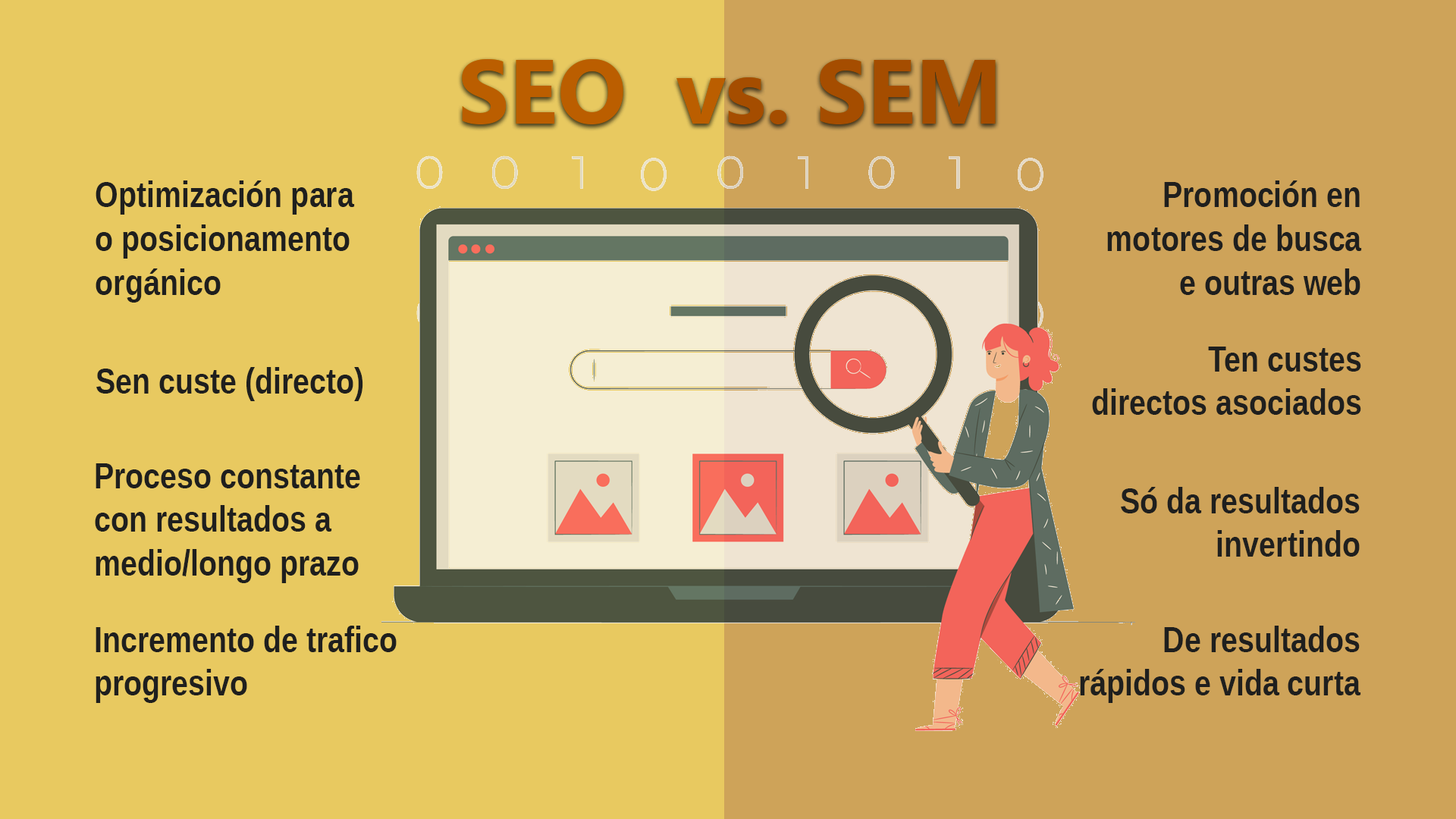
<style>
.page{position:relative;width:1456px;height:819px;background:#e8c960}
.page>*{position:absolute;margin:0}
.t1{font:91px "SegoeUI-Bold"}
.t2{font:36.4px "LiberationSansNarrow-Bold";color:#1f1f1e}
</style>
<div class="page">
<p class="t1" style="left:462px;top:59px;width:534px;height:65px">SEO  vs. SEM</p>
<p class="t1" style="left:462px;top:59px;width:534px;height:65px">SEO  vs. SEM</p>
<p class="t1" style="left:462px;top:59px;width:534px;height:65px">SEO  vs. SEM</p>
<p class="t2" style="left:96px;top:180px;width:259px;height:123px">Optimización para<br>o posicionamento<br>orgánico</p>
<p class="t2" style="left:1107px;top:180px;width:255px;height:115px;text-align:right">Promoción en<br>motores de busca<br>e outras web</p>
<p class="t2" style="left:1092px;top:347px;width:269px;height:68px;text-align:right">Ten custes<br>directos asociados</p>
<p class="t2" style="left:96px;top:367px;width:267px;height:34px">Sen custe (directo)</p>
<p class="t2" style="left:95px;top:463px;width:265px;height:120px">Proceso constante<br>con resultados a <br>medio/longo prazo</p>
<p class="t2" style="left:1121px;top:487px;width:239px;height:70px;text-align:right">Só da resultados<br>invertindo</p>
<p class="t2" style="left:96px;top:626px;width:301px;height:77px">Incremento de trafico<br>progresivo</p>
<p class="t2" style="left:1080px;top:626px;width:281px;height:77px;text-align:right">De resultados<br>rápidos e vida curta</p>
</div>
